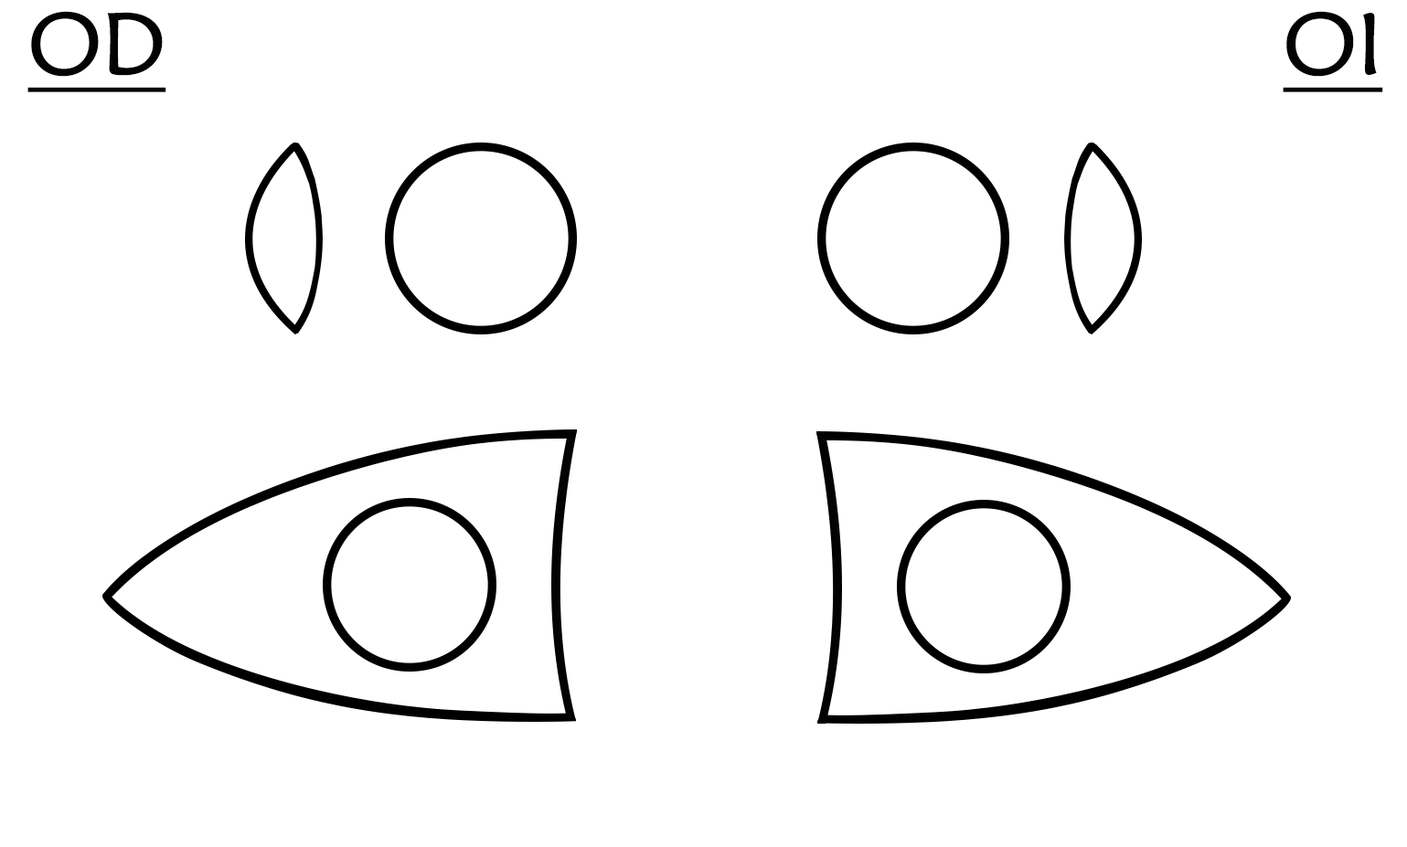
<style>
.page{position:relative;width:1407px;height:847px;background:#ffffff}
.page>*{position:absolute;margin:0}
.t1{font:87.8px "MaiandraGD-Regular";color:#030303;text-decoration:underline}
</style>
<div class="page">
<p class="t1" style="left:27px;top:11px;width:139px;height:81px">OD</p>
<p class="t1" style="left:1283px;top:11px;width:100px;height:81px">OI</p>
</div>
